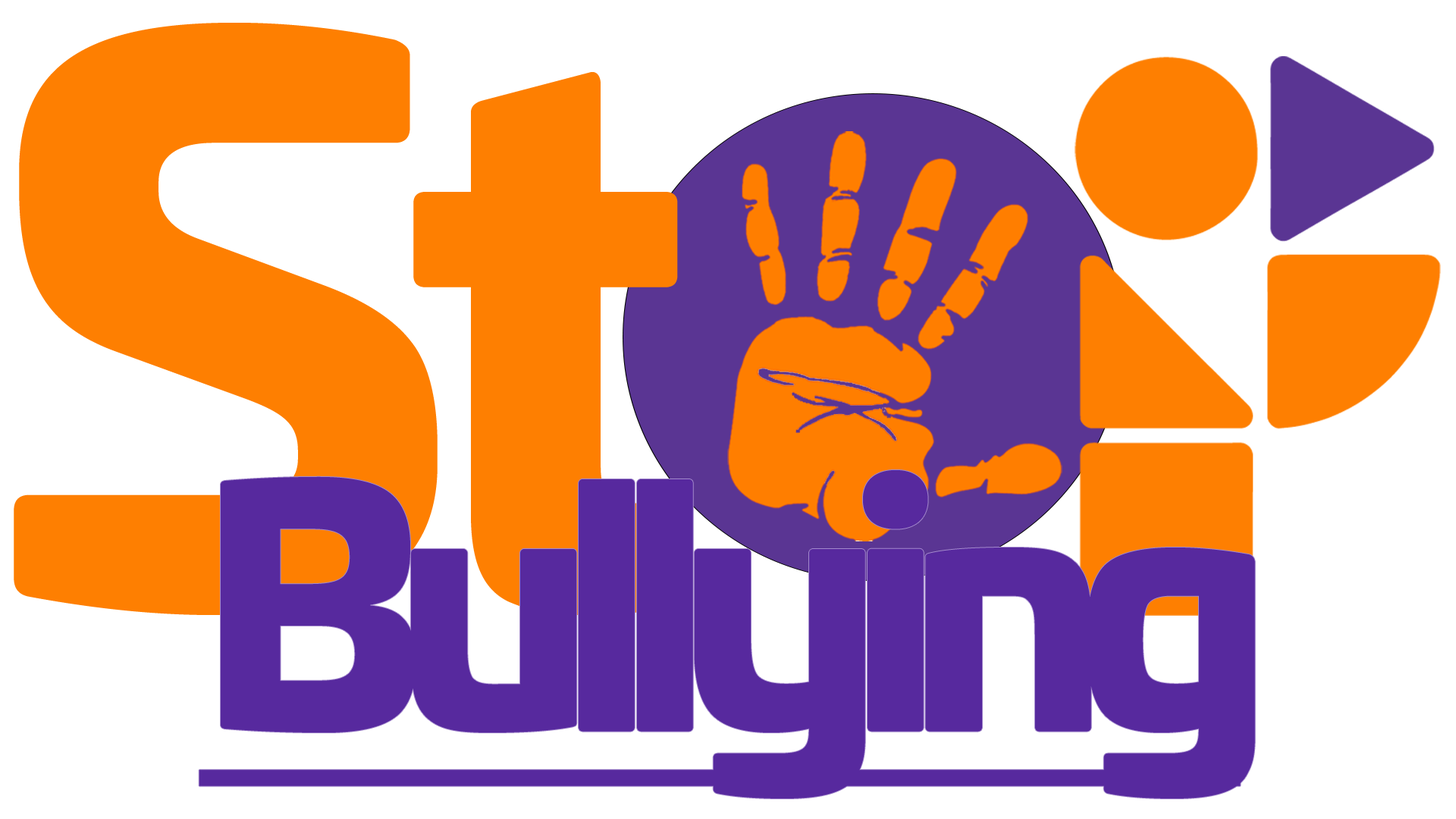
<style>
.page{position:relative;width:1456px;height:819px;background:#ffffff}
.page>*{position:absolute;margin:0}
.t1{font:745.4px "UniviaPro-Black";letter-spacing:-0.1em;color:#fe7f01}
.t2{font:321.3px "UniviaPro-Black";letter-spacing:-0.1em;color:#57299e;text-decoration:underline}
</style>
<div class="page">
<p class="t1" style="left:14px;top:23px;width:671px;height:593px">S t</p>
<p class="t2" style="left:199px;top:470px;width:1056px;height:329px">Bullying</p>
</div>
